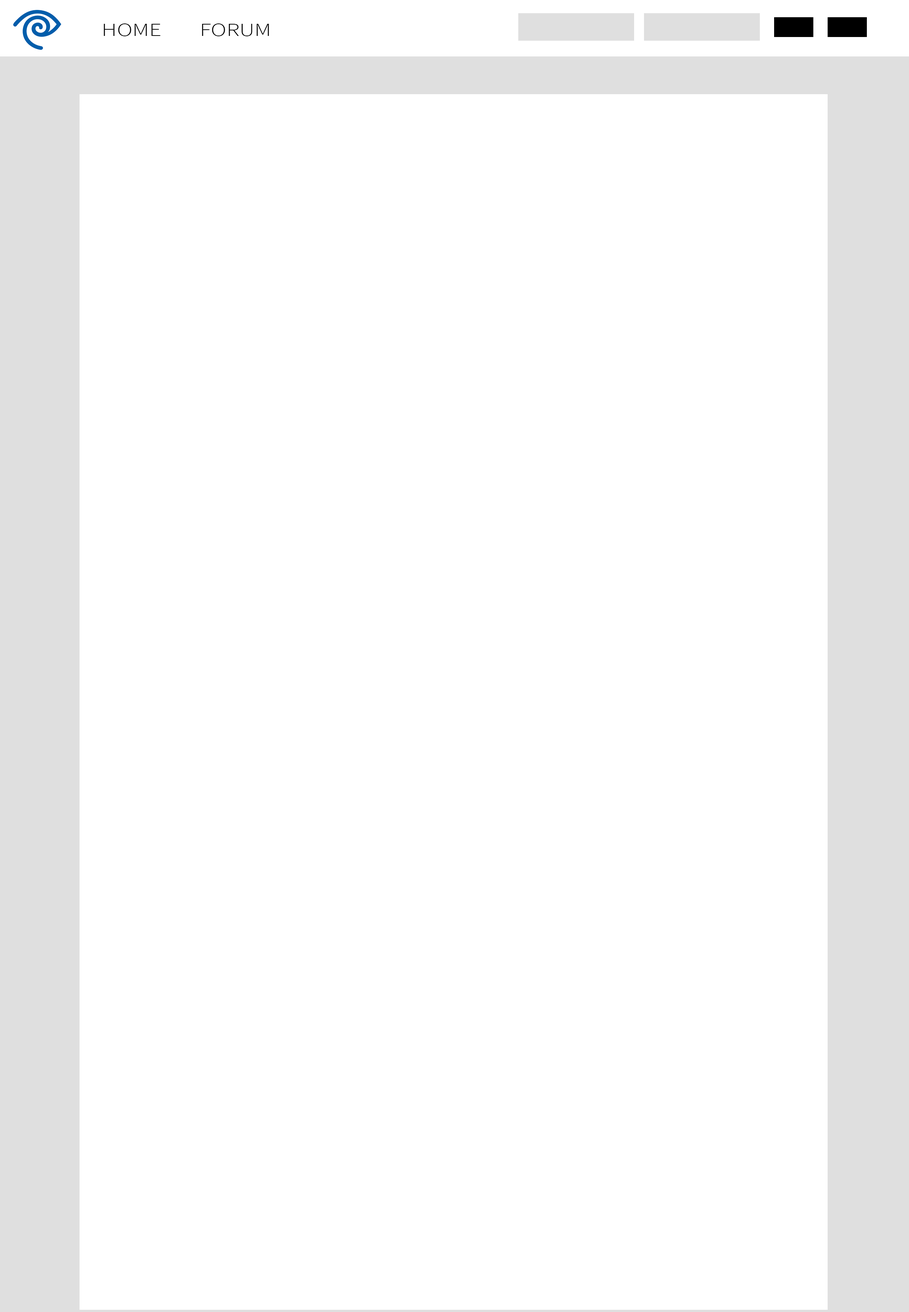
<style>
.page{position:relative;width:909px;height:1312px;background:#ffffff}
.page>*{position:absolute;margin:0}
.t1{font:18.4px "SourceSansPro-Light";color:#000000;scale:1.3 1}
</style>
<div class="page">
<p class="t1" style="left:104px;top:23px;width:57px;height:13px">HOME</p>
<p class="t1" style="left:202px;top:23px;width:67px;height:13px">FORUM</p>
</div>
